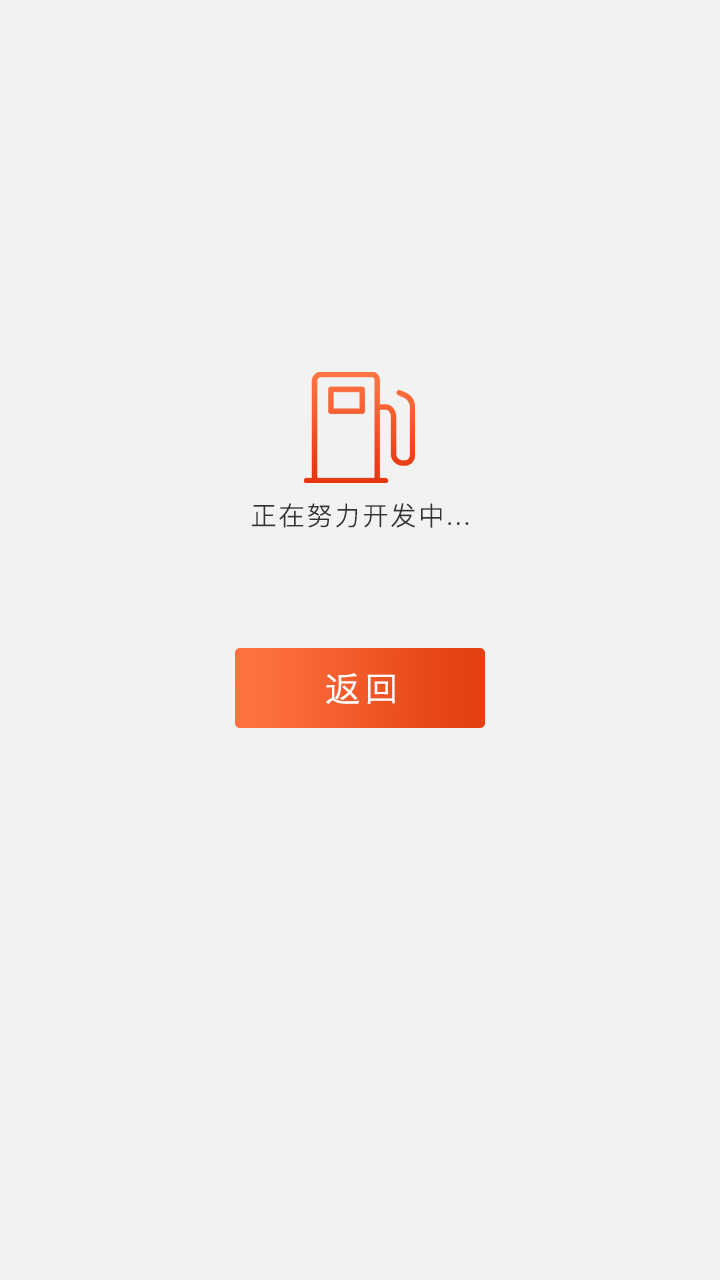
<style>
.page{position:relative;width:720px;height:1280px;background:#f2f2f2}
.page>*{position:absolute;margin:0}
.t1{font:26px "PingFangSC-Light";letter-spacing:0.075em;color:#333333}
.t2{font:36px "STHeitiSC-Light";letter-spacing:0.075em;color:#ffffff}
</style>
<div class="page">
<p class="t1" style="left:252px;top:503px;width:217px;height:25px">正在努力开发中...</p>
<p class="t2" style="left:326px;top:673px;width:69px;height:31px">返回</p>
</div>
